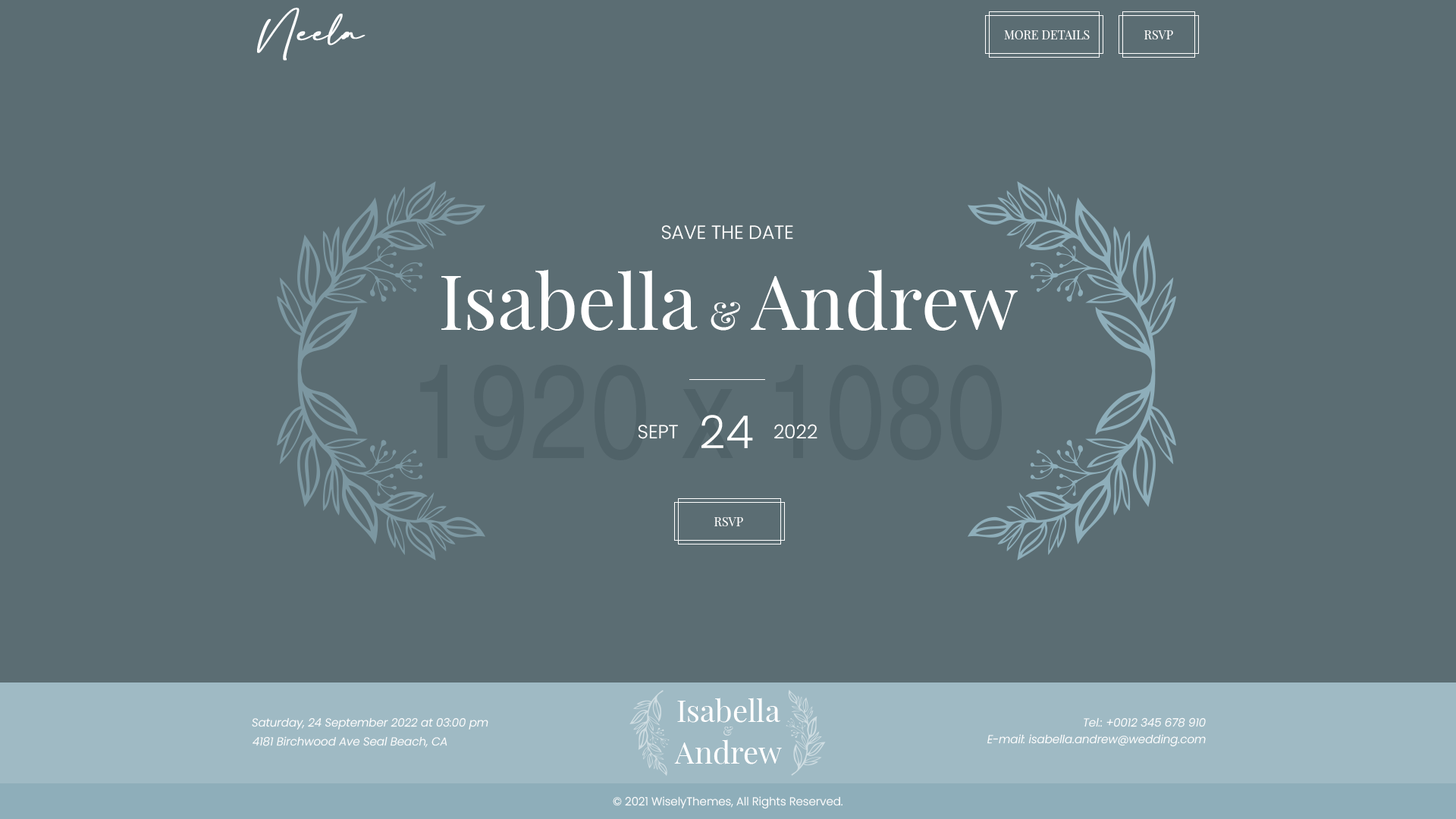
<style>
.page{position:relative;width:1456px;height:819px;background:#5b6d73}
.page>*{position:absolute;margin:0}
.t1{font:12.1px "PlayfairDisplay-Regular";color:#ffffff}
.t2{font:19px "Poppins-Light";color:#ffffff;text-transform:uppercase}
.t3{font:75.8px "PlayfairDisplay-Regular";color:#ffffff}
.t4{font:37.9px "PlayfairDisplay-Regular";color:#ffffff}
.t5{font:45.5px "Poppins-Light";color:#ffffff}
.t6{font:30.3px/41.7px "PlayfairDisplay-Regular";color:#ffffff}
.t7{font:11.4px "Poppins-LightItalic";color:#ffffff}
.t8{font:12.1px "PlayfairDisplay-Regular";color:#d3dee3}
.t9{font:11.4px "Poppins-Light";color:#ffffff}
</style>
<div class="page">
<p class="t1" style="left:1004px;top:30px;width:86px;height:9px">MORE DETAILS</p>
<p class="t1" style="left:1144px;top:30px;width:29px;height:9px">RSVP</p>
<p class="t2" style="left:661px;top:225px;width:132px;height:15px">Save the date</p>
<p class="t3" style="left:441px;top:269px;width:577px;height:62px">Isabella <span class="t4">&amp; </span>Andrew</p>
<p class="t2" style="left:638px;top:425px;width:40px;height:14px">Sept</p>
<p class="t5" style="left:701px;top:415px;width:52px;height:33px">24</p>
<p class="t2" style="left:774px;top:424px;width:43px;height:15px">2022</p>
<p class="t1" style="left:714px;top:517px;width:29px;height:9px">RSVP</p>
<p class="t6" style="left:674px;top:698px;width:108px;height:66px;text-align:center">Isabella<br>Andrew</p>
<p class="t7" style="left:252px;top:717px;width:236px;height:13px">Saturday, 24 September 2022 at 03:00 pm</p>
<p class="t7" style="left:1084px;top:717px;width:122px;height:10px">Tel.: +0012 345 678 910</p>
<p class="t7" style="left:253px;top:736px;width:194px;height:12px">4181 Birchwood Ave Seal Beach, CA</p>
<p class="t8" style="left:723px;top:726px;width:10px;height:10px">&amp;</p>
<p class="t7" style="left:987px;top:734px;width:219px;height:13px">E-mail: isabella.andrew@wedding.com</p>
<p class="t9" style="left:613px;top:796px;width:229px;height:13px">© 2021 WiselyThemes, All Rights Reserved.</p>
</div>
